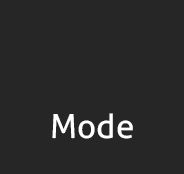
<style>
.page{position:relative;width:184px;height:174px;background:#262626}
.page>*{position:absolute;margin:0}
.t1{font:33.3px "Aller-Regular";color:#ffffff}
</style>
<div class="page">
<p class="t1" style="left:52px;top:113px;width:81px;height:26px">Mode</p>
</div>
